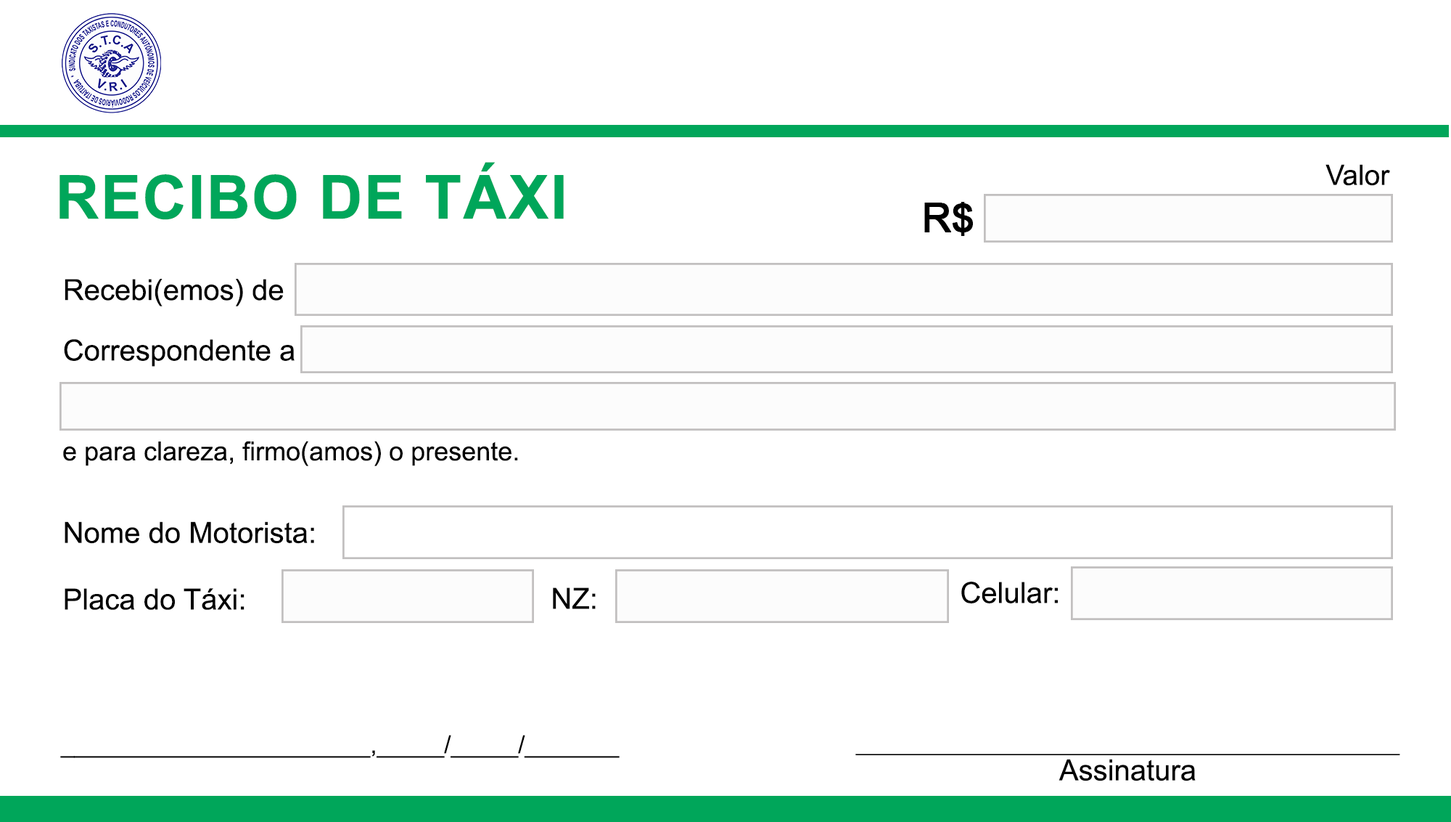
<style>
.page{position:relative;width:1451px;height:822px;background:#ffffff}
.page>*{position:absolute;margin:0}
.t1{font:60.4px "Arial-BoldMT";color:#00a65a;font-weight:bold}
.t2{font:28.2px "ArialMT";color:#000000}
.t3{font:40.3px "ArialMT";color:#000000;font-weight:bold}
.t4{font:29px/60.4px "ArialMT";color:#000000}
.t5{font:26.1px "ArialMT";color:#000000}
.t6{font:29px "ArialMT";color:#000000}
.t7{font:24.2px "ArialMT";color:#000000}
.t8{font:24.2px/28.2px "MyriadPro-Regular";color:#000000}
.t9{font:29px/28.2px "ArialMT";color:#000000}
</style>
<div class="page">
<p class="t1" style="left:60px;top:162px;width:504px;height:58px">RECIBO DE TÁXI</p>
<p class="t2" style="left:1326px;top:164px;width:65px;height:22px">Valor</p>
<p class="t3" style="left:925px;top:202px;width:48px;height:34px">R$</p>
<p class="t4" style="left:64px;top:279px;width:231px;height:87px">Recebi(emos) de<br>Correspondente a</p>
<p class="t5" style="left:63px;top:441px;width:455px;height:25px">e para clareza, firmo(amos) o presente.</p>
<p class="t6" style="left:65px;top:521px;width:249px;height:23px">Nome do Motorista:</p>
<p class="t6" style="left:962px;top:581px;width:96px;height:22px">Celular:</p>
<p class="t6" style="left:65px;top:588px;width:180px;height:22px">Placa do Táxi:</p>
<p class="t6" style="left:553px;top:587px;width:43px;height:22px">NZ:</p>
<p class="t7" style="left:60px;top:734px;width:560px;height:24px">_______________________,_____/_____/_______</p>
<p class="t8" style="left:856px;top:753px;width:545px;height:28px;text-align:center">_____________________________________________<br><span class="t9">Assinatura</span></p>
</div>
